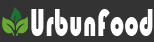
<style>
.page{position:relative;width:154px;height:42px;background:#333333}
.page>*{position:absolute;margin:0}
.t1{font:39.8px "Bauhaus93";letter-spacing:0.02em;color:#ffffff;scale:0.63 1}
</style>
<div class="page">
<p class="t1" style="left:31px;top:9px;width:122px;height:27px">UrbunFood</p>
</div>
